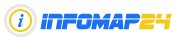
<style>
.page{position:relative;width:173px;height:42px;background:#ffffff}
.page>*{position:absolute;margin:0}
.t1{font:20px "TimesNewRomanPS-BoldItalicMT";color:#1a72f2}
.t2{font:23px "SFSportsNight";color:#1a72f2}
.t3{font:23px "SFSportsNight";color:#f5c814}
</style>
<div class="page">
<p class="t1" style="left:18px;top:14px;width:6px;height:13px">i</p>
<p class="t2" style="left:40px;top:13px;width:132px;height:17px">infomap<span class="t3">24</span></p>
</div>
